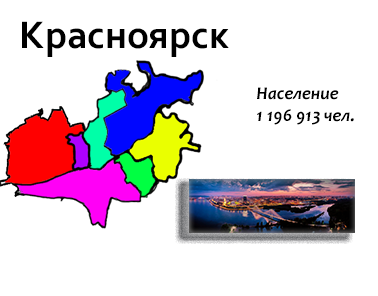
<style>
.page{position:relative;width:378px;height:296px;background:#ffffff}
.page>*{position:absolute;margin:0}
.t1{font:40px "Corbel-Bold";color:#000000}
.t2{font:18px "Candara-BoldItalic";color:#000000}
</style>
<div class="page">
<p class="t1" style="left:22px;top:21px;width:207px;height:36px">Красноярск</p>
<p class="t2" style="left:257px;top:87px;width:97px;height:38px">Население <br>1 196 913 чел.</p>
</div>
